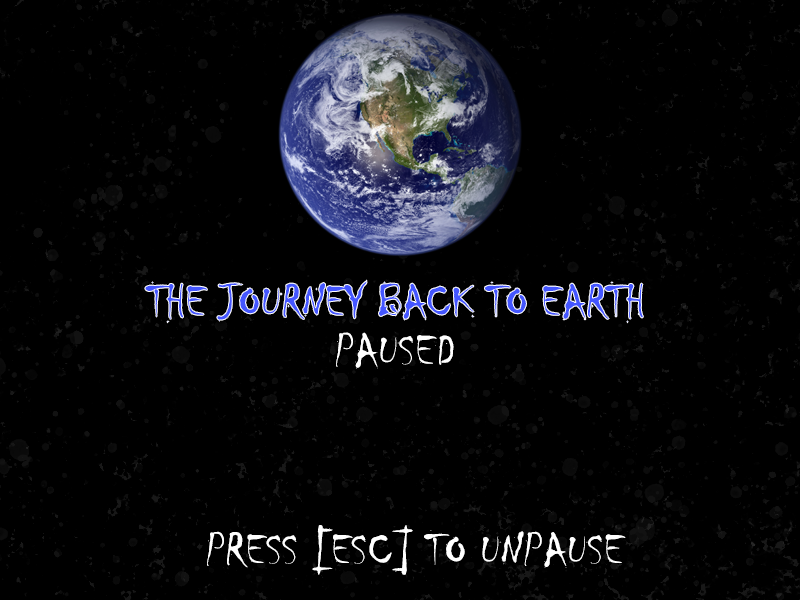
<style>
.page{position:relative;width:800px;height:600px;background:#000000}
.page>*{position:absolute;margin:0}
.t1{font:48px "Chiller-Regular";color:#4456ff}
.t2{font:48px "Chiller-Regular";color:#ffffff}
</style>
<div class="page">
<p class="t1" style="left:145px;top:280px;width:498px;height:43px">THE JOURNEY BACK TO EARTH</p>
<p class="t2" style="left:336px;top:332px;width:118px;height:37px">PAUSED</p>
<p class="t2" style="left:207px;top:525px;width:419px;height:50px">PRESS [ESC] TO UNPAUSE</p>
</div>
